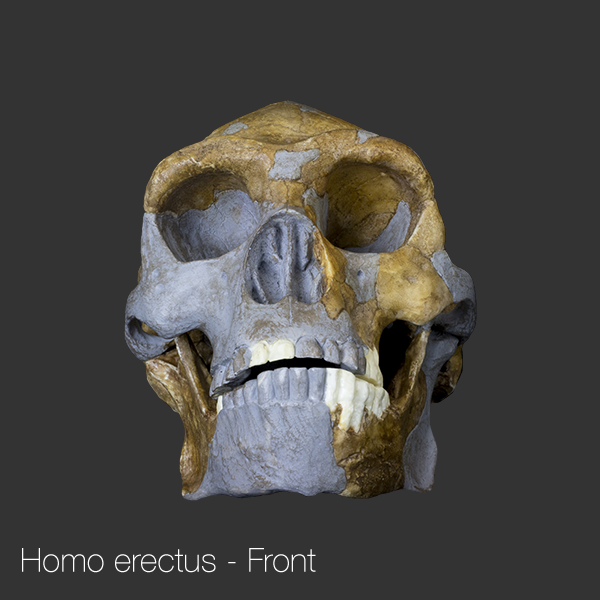
<style>
.page{position:relative;width:600px;height:600px;background:#333333}
.page>*{position:absolute;margin:0}
.t1{font:33.3px "HelveticaNeue-Thin";color:#ffffff}
</style>
<div class="page">
<p class="t1" style="left:22px;top:548px;width:294px;height:25px">Homo erectus - Front</p>
</div>
